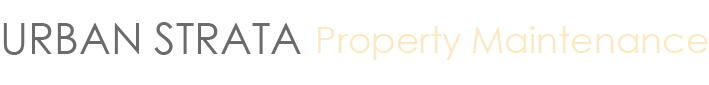
<style>
.page{position:relative;width:709px;height:85px;background:#ffffff}
.page>*{position:absolute;margin:0}
.t1{font:43px "CenturyGothic";color:#6c6a6a}
.t2{font:36px "CenturyGothic";color:#fce8c2}
</style>
<div class="page">
<p class="t1" style="left:3px;top:22px;width:298px;height:33px">URBAN STRATA</p>
<p class="t2" style="left:318px;top:26px;width:390px;height:34px">Property Maintenance</p>
</div>
